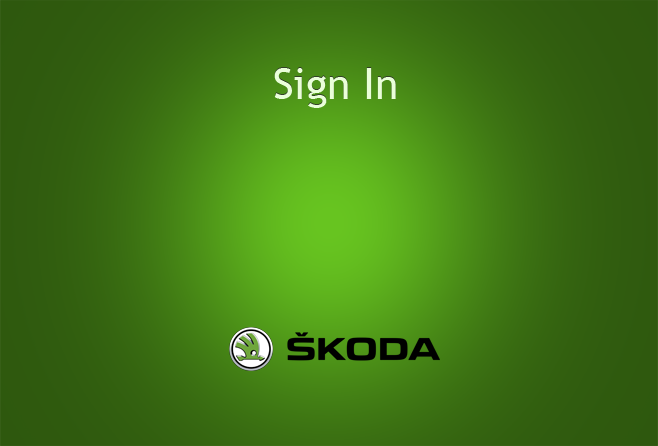
<style>
.page{position:relative;width:658px;height:446px}
.page>*{position:absolute;margin:0}
.t1{font:42.6px "TrebuchetMS";color:#ffffff}
.t2{font:42.6px "TrebuchetMS";color:#eaffda}
</style>
<div class="page">
<p class="t1" style="left:274px;top:67px;width:122px;height:40px">Sign In</p>
<p class="t2" style="left:274px;top:68px;width:122px;height:40px">Sign In</p>
</div>
